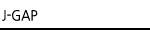
<style>
.page{position:relative;width:150px;height:30px;background:#ffffff}
.page>*{position:absolute;margin:0}
.t1{font:14px "NanumGothic";color:#000000;scale:0.9 1}
</style>
<div class="page">
<p class="t1" style="left:2px;top:10px;width:36px;height:11px">J-GAP</p>
</div>
